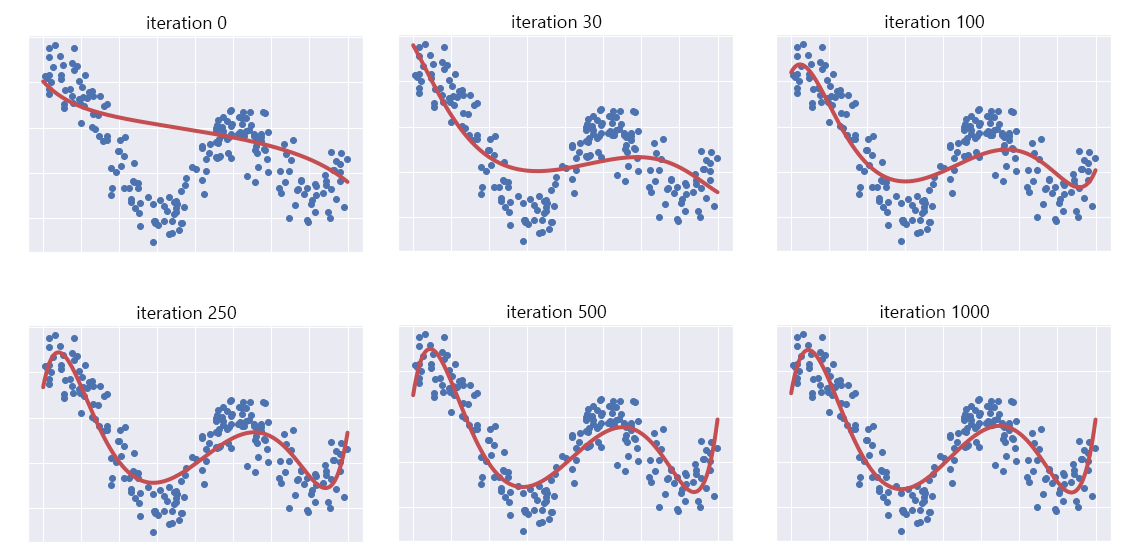
<style>
.page{position:relative;width:1142px;height:557px;background:#eaeaf2}
.page>*{position:absolute;margin:0}
.t1{font:18px "SegoeUI";color:#080808}
</style>
<div class="page">
<p class="t1" style="left:147px;top:16px;width:80px;height:13px">iteration 0</p>
<p class="t1" style="left:512px;top:15px;width:90px;height:13px">iteration 30</p>
<p class="t1" style="left:885px;top:15px;width:100px;height:13px">iteration 100</p>
<p class="t1" style="left:507px;top:305px;width:100px;height:13px">iteration 500</p>
<p class="t1" style="left:880px;top:305px;width:110px;height:13px">iteration 1000</p>
<p class="t1" style="left:137px;top:306px;width:100px;height:13px">iteration 250</p>
</div>
